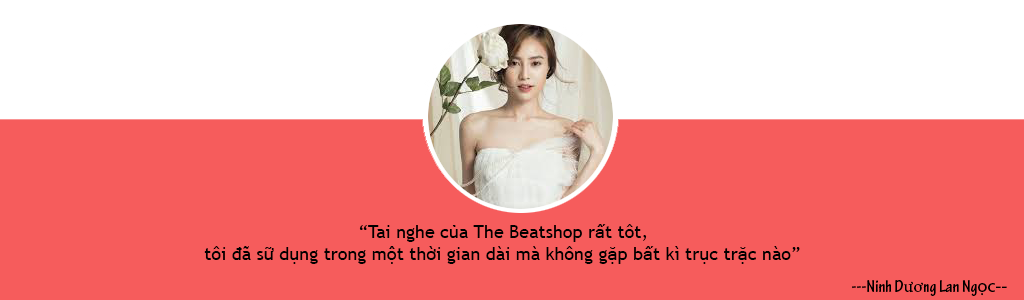
<style>
.page{position:relative;width:1024px;height:300px;background:#f65c5c}
.page>*{position:absolute;margin:0}
.t1{font:18px "TrebuchetMS";color:#000000}
.t2{font:18px "MicrosoftSansSerif";color:#000000}
.t3{font:18px "TektonPro-BoldCond";color:#000000}
.t4{font:18px "MinionPro-Regular";color:#000000}
.t5{font:18px "MyriadPro-Regular";color:#000000}
</style>
<div class="page">
<p class="t1" style="left:204px;top:224px;width:596px;height:40px;text-align:center">“Tai nghe c<span class="t2">ủ</span>a The Beatshop r<span class="t2">ấ</span>t tôt, <br>tôi đã s<span class="t2">ữ</span> d<span class="t2">ụ</span>ng trong m<span class="t2">ộ</span>t th<span class="t2">ờ</span>i gian dài mà không g<span class="t2">ặ</span>p b<span class="t2">ấ</span>t kì tr<span class="t2">ụ</span>c tr<span class="t2">ặ</span>c nào”</p>
<p class="t3" style="left:852px;top:280px;width:155px;height:16px">---Ninh D<span class="t4">ươ</span>ng Lan Ng<span class="t5">ọc--</span></p>
</div>
